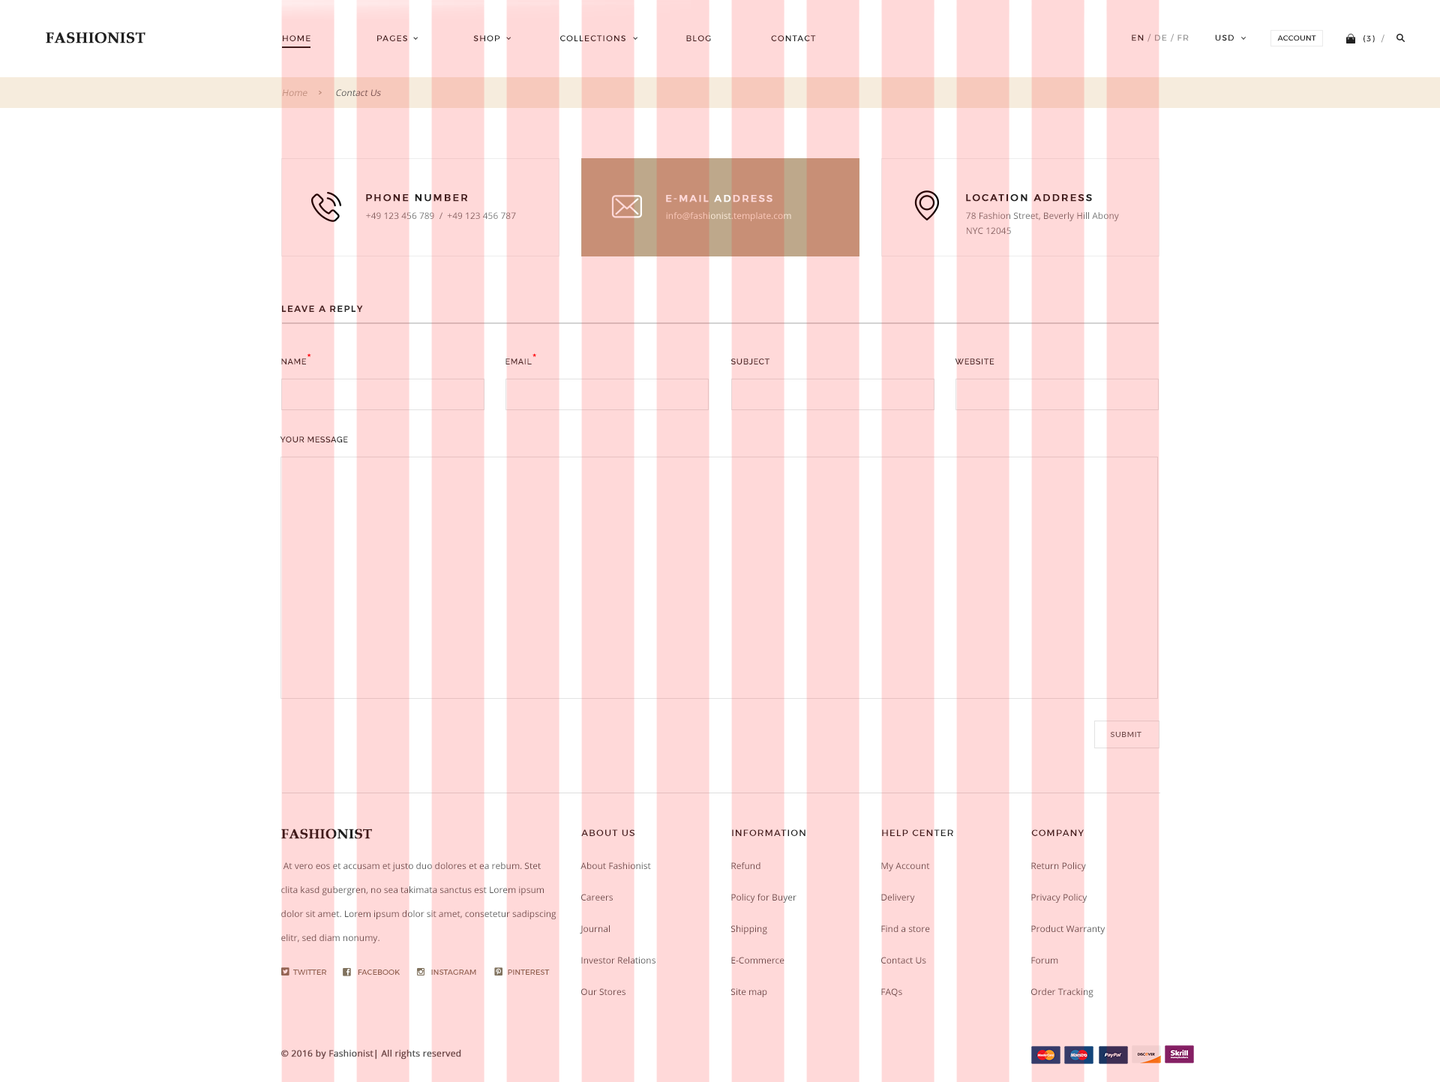
<style>
.page{position:relative;width:1440px;height:1082px;background:#ffffff}
.page>*{position:absolute;margin:0}
.t1{font:15px "BookAntiqua-Bold";color:#202020;text-transform:uppercase;font-weight:bold}
.t2{font:8.2px "Montserrat-Regular";letter-spacing:0.1em}
.t3{font:8.2px "Montserrat-Regular";letter-spacing:0.1em;color:#939393}
.t4{font:8.2px "Montserrat-Regular";letter-spacing:0.1em;color:#202020}
.t5{font:7.5px "Montserrat-Regular";letter-spacing:0.01em;color:#202020}
.t6{font:9px "OpenSans";font-style:italic}
.t7{font:9.8px "Montserrat-Regular";letter-spacing:0.15em;color:#411b1b;text-transform:uppercase;font-weight:bold}
.t8{font:9.8px "Montserrat-Regular";letter-spacing:0.15em;color:#ffd9d9;text-transform:uppercase;font-weight:bold}
.t9{font:9px "OpenSans";color:#707070}
.t10{font:9px "OpenSans";color:#fbc7b9}
.t11{font:9px/15px "OpenSans";color:#707070}
.t12{font:9px "Montserrat-SemiBold";letter-spacing:0.1em;color:#492323;text-transform:uppercase}
.t13{font:8.2px "Raleway-SemiBold";letter-spacing:0.05em;color:#492323;text-transform:uppercase}
.t14{font:15px "Raleway-SemiBold";letter-spacing:0.05em;color:#492323;text-transform:uppercase}
.t15{font:7.5px "Montserrat-Regular";letter-spacing:0.05em;color:#5f5f5f}
.t16{font:13.5px "BookAntiqua-Bold";color:#411b1b;text-transform:uppercase;font-weight:bold}
.t17{font:9px "Montserrat-Regular";letter-spacing:0.1em;color:#411b1b;text-transform:uppercase}
.t18{font:9px/24px "OpenSans";color:#6f4949}
.t19{font:9px/31.5px "OpenSans";color:#6f4949}
.t20{font:7.5px "Montserrat-Regular";color:#80725e;text-transform:uppercase}
.t21{font:9px "OpenSans";color:#6f4949;font-weight:bold}
</style>
<div class="page">
<p class="t1" style="left:46px;top:32px;width:100px;height:12px">Fashionist</p>
<p class="t2" style="left:283px;top:35px;width:533px;height:6px">HOME                      PAGES                      SHOP                    COLLECTIONS                    BLOG                    CONTACT</p>
<p class="t3" style="left:1132px;top:34px;width:57px;height:8px"><span class="t4">EN </span>/ DE / FR</p>
<p class="t4" style="left:1215px;top:34px;width:19px;height:7px">USD</p>
<p class="t5" style="left:1277px;top:35px;width:39px;height:6px">ACCOUNT</p>
<p class="t4" style="left:1364px;top:34px;width:20px;height:9px">(3)  /</p>
<p class="t6" style="left:282px;top:89px;width:99px;height:7px">Home            Contact Us</p>
<p class="t7" style="left:366px;top:194px;width:102px;height:8px">phone number</p>
<p class="t8" style="left:666px;top:195px;width:106px;height:7px">e-mail address</p>
<p class="t7" style="left:966px;top:194px;width:126px;height:8px">location address</p>
<p class="t9" style="left:366px;top:212px;width:150px;height:7px">+49 123 456 789  /  +49 123 456 787</p>
<p class="t10" style="left:666px;top:212px;width:125px;height:9px">info@fashionist.template.com</p>
<p class="t11" style="left:966px;top:212px;width:153px;height:22px">78 Fashion Street, Beverly Hill Abony <br>NYC 12045</p>
<p class="t12" style="left:282px;top:305px;width:81px;height:7px">leave a reply</p>
<p class="t13" style="left:281px;top:353px;width:30px;height:11px">NAME<span class="t14">*</span></p>
<p class="t13" style="left:506px;top:353px;width:30px;height:11px">email<span class="t14">*</span></p>
<p class="t13" style="left:730px;top:358px;width:40px;height:6px">subject</p>
<p class="t13" style="left:955px;top:358px;width:39px;height:6px">WEBSITE</p>
<p class="t13" style="left:280px;top:436px;width:68px;height:6px">your message</p>
<p class="t15" style="left:1110px;top:732px;width:32px;height:5px">SUBMIT</p>
<p class="t16" style="left:281px;top:829px;width:91px;height:10px">Fashionist</p>
<p class="t17" style="left:581px;top:830px;width:53px;height:6px">about us</p>
<p class="t17" style="left:732px;top:830px;width:74px;height:6px">INFORMATION</p>
<p class="t17" style="left:882px;top:830px;width:71px;height:6px">help center</p>
<p class="t17" style="left:1031px;top:830px;width:53px;height:6px">Company</p>
<p class="t18" style="left:281px;top:862px;width:275px;height:82px">At vero eos et accusam et justo duo dolores et ea rebum. Stet clita kasd gubergren, no sea takimata sanctus est Lorem ipsum dolor sit amet. Lorem ipsum dolor sit amet, consetetur sadipscing elitr, sed diam nonumy.</p>
<p class="t19" style="left:580px;top:862px;width:76px;height:133px">About Fashionist <br>Careers<br>Journal<br>Investor Relations<br>Our Stores</p>
<p class="t19" style="left:730px;top:862px;width:66px;height:136px">Refund<br>Policy for Buyer<br>Shipping<br>E-Commerce<br>Site map</p>
<p class="t19" style="left:881px;top:862px;width:49px;height:135px">My Account<br>Delivery<br>Find a store<br>Contact Us<br>FAQs</p>
<p class="t19" style="left:1031px;top:862px;width:75px;height:136px">Return Policy<br>Privacy Policy<br>Product Warranty<br>Forum<br>Order Tracking</p>
<p class="t20" style="left:293px;top:970px;width:257px;height:5px">TWITTER                FACEBOOK                INSTAGRAM                PINTEREST</p>
<p class="t21" style="left:281px;top:1050px;width:180px;height:10px">© 2016 by Fashionist| All rights reserved</p>
</div>
